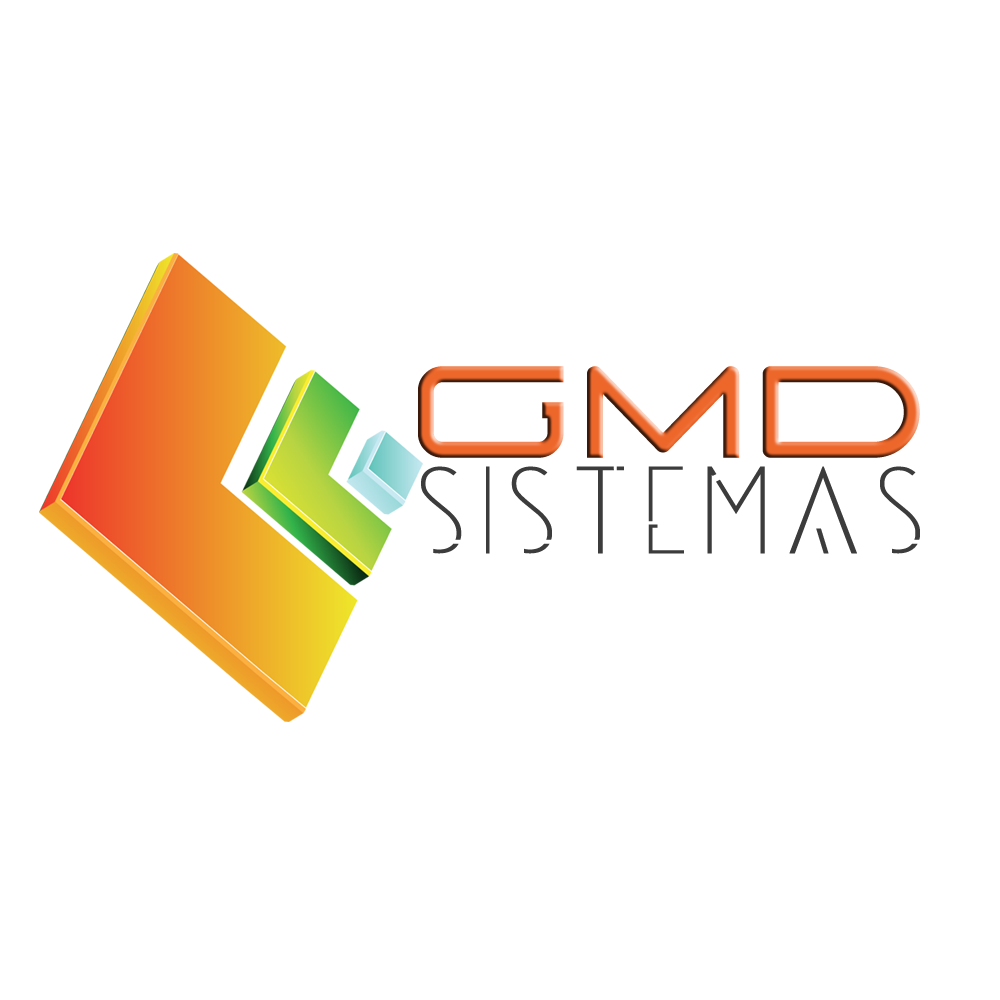
<style>
.page{position:relative;width:1000px;height:1000px;background:#ffffff}
.page>*{position:absolute;margin:0}
.t1{font:167.7px "Suissnord";letter-spacing:0.069em}
.t2{font:110px "Universe-Display";letter-spacing:0.069em;color:#3c3c3c;scale:1.14 1}
</style>
<div class="page">
<p class="t1" style="left:418px;top:366px;width:502px;height:92px">GMD</p>
<p class="t2" style="left:421px;top:466px;width:499px;height:88px">SISTEMAS</p>
</div>
